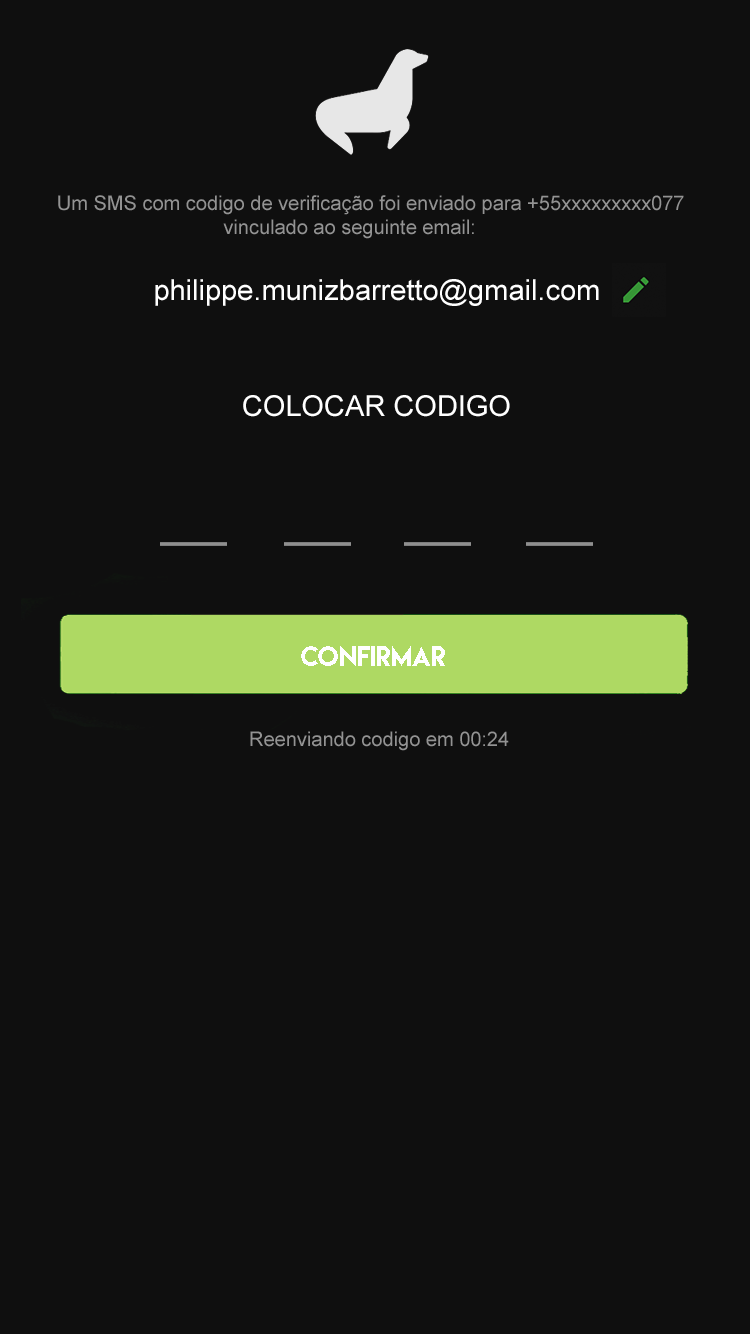
<style>
.page{position:relative;width:750px;height:1334px;background:#0f0f0f}
.page>*{position:absolute;margin:0}
.t1{font:20px "ArialMT";color:#939393}
.t2{font:29px "ArialMT";color:#ffffff}
.t3{font:25px "LemonMilk";color:#ffffff}
</style>
<div class="page">
<p class="t1" style="left:58px;top:195px;width:626px;height:44px;text-align:center">Um SMS com codigo de verificação foi enviado para +55xxxxxxxxx077 <br>vinculado ao seguinte email:</p>
<p class="t2" style="left:155px;top:279px;width:444px;height:27px">philippe.munizbarretto@gmail.com</p>
<p class="t2" style="left:243px;top:395px;width:267px;height:22px">COLOCAR CODIGO</p>
<p class="t3" style="left:301px;top:646px;width:144px;height:20px">CONFIRMAR</p>
<p class="t1" style="left:250px;top:731px;width:259px;height:20px">Reenviando codigo em 00:24</p>
</div>
